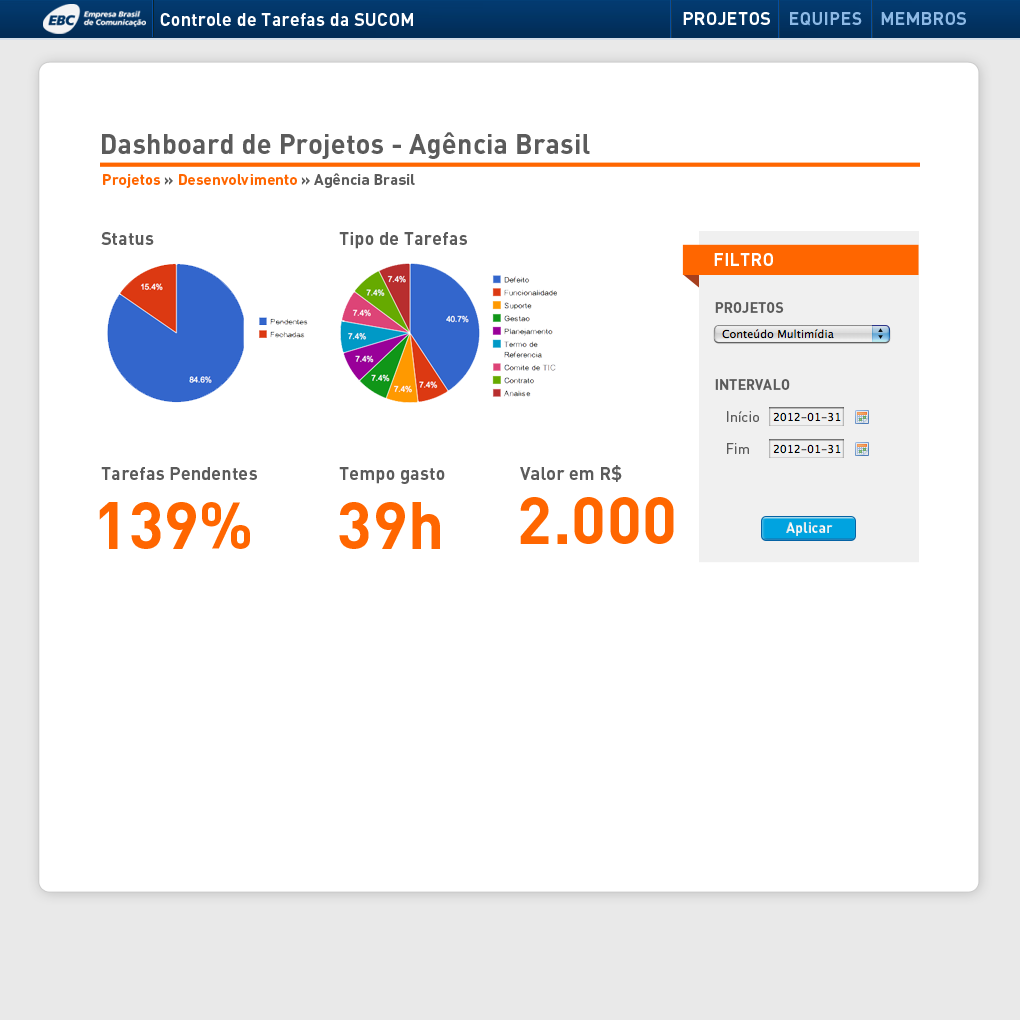
<style>
.page{position:relative;width:1020px;height:1020px;background:#ffffff}
.page>*{position:absolute;margin:0}
.t1{font:18.5px "DIN-Bold";letter-spacing:0.01em;color:#ffffff}
.t2{font:18.5px "DIN-Bold";letter-spacing:0.01em;color:#8db9e5}
.t3{font:27.8px "DIN-Bold";letter-spacing:0.01em;color:#5b5b5b}
.t4{font:15.5px "DIN-Bold";letter-spacing:0.01em;color:#5b5b5b}
.t5{font:15.5px "DIN-Bold";letter-spacing:0.01em;color:#ff6600}
.t6{font:18.5px "DIN-Bold";letter-spacing:0.01em;color:#5b5b5b}
.t7{font:14.4px "DIN-Bold";letter-spacing:0.01em;color:#5b5b5b}
.t8{font:14.4px "DIN-Regular";letter-spacing:0.01em;color:#5b5b5b}
.t9{font:65.9px "DIN-Bold";letter-spacing:0.01em;color:#ff6600}
.t10{font:14.4px "DIN-Bold";letter-spacing:0.01em;color:#f5f5f5}
</style>
<div class="page">
<p class="t1" style="left:160px;top:13px;width:253px;height:13px">Controle de Tarefas da SUCOM</p>
<p class="t2" style="left:683px;top:12px;width:283px;height:14px"><span class="t1">PROJETOS</span>    EQUIPES    MEMBROS</p>
<p class="t3" style="left:102px;top:132px;width:488px;height:27px">Dashboard de Projetos - Agência Brasil</p>
<p class="t4" style="left:103px;top:173px;width:312px;height:15px"><span class="t5">Projetos </span>» <span class="t5">Desenvolvimento </span>» Agência Brasil</p>
<p class="t6" style="left:101px;top:232px;width:53px;height:13px">Status</p>
<p class="t6" style="left:339px;top:232px;width:128px;height:17px">Tipo de Tarefas</p>
<p class="t1" style="left:714px;top:253px;width:59px;height:13px">FILTRO</p>
<p class="t7" style="left:715px;top:302px;width:69px;height:11px">PROJETOS</p>
<p class="t7" style="left:715px;top:379px;width:75px;height:11px">INTERVALO</p>
<p class="t8" style="left:727px;top:411px;width:32px;height:11px">Início</p>
<p class="t8" style="left:727px;top:443px;width:22px;height:11px">Fim</p>
<p class="t6" style="left:101px;top:467px;width:156px;height:13px">Tarefas Pendentes</p>
<p class="t6" style="left:339px;top:467px;width:106px;height:17px">Tempo gasto</p>
<p class="t6" style="left:520px;top:465px;width:102px;height:17px">Valor em R$</p>
<p class="t9" style="left:520px;top:497px;width:154px;height:47px">2.000</p>
<p class="t9" style="left:99px;top:502px;width:151px;height:47px">139%</p>
<p class="t9" style="left:339px;top:502px;width:101px;height:47px">39h</p>
<p class="t10" style="left:786px;top:522px;width:47px;height:14px">Aplicar</p>
</div>
